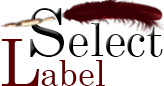
<style>
.page{position:relative;width:164px;height:86px;background:#ffffff}
.page>*{position:absolute;margin:0}
.t1{font:44.5px "Century";color:#000000}
.t2{font:65px "Century";color:#000000}
.t3{font:36.4px "Century";color:#600101;scale:0.93 1}
.t4{font:65px "Century";color:#600101;scale:0.93 1}
</style>
<div class="page">
<p class="t1" style="left:30px;top:8px;width:133px;height:49px"><span class="t2">S</span>elect</p>
<p class="t3" style="left:1px;top:39px;width:104px;height:47px"><span class="t4">L</span>abel</p>
</div>
